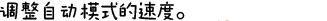
<style>
.page{position:relative;width:327px;height:21px;background:#ffffff}
.page>*{position:absolute;margin:0}
.t1{font:22px "¢è?";color:#000000}
</style>
<div class="page">
<p class="t1" style="left:0px;top:1px;width:185px;height:20px">调整自动模式的速度。</p>
</div>
